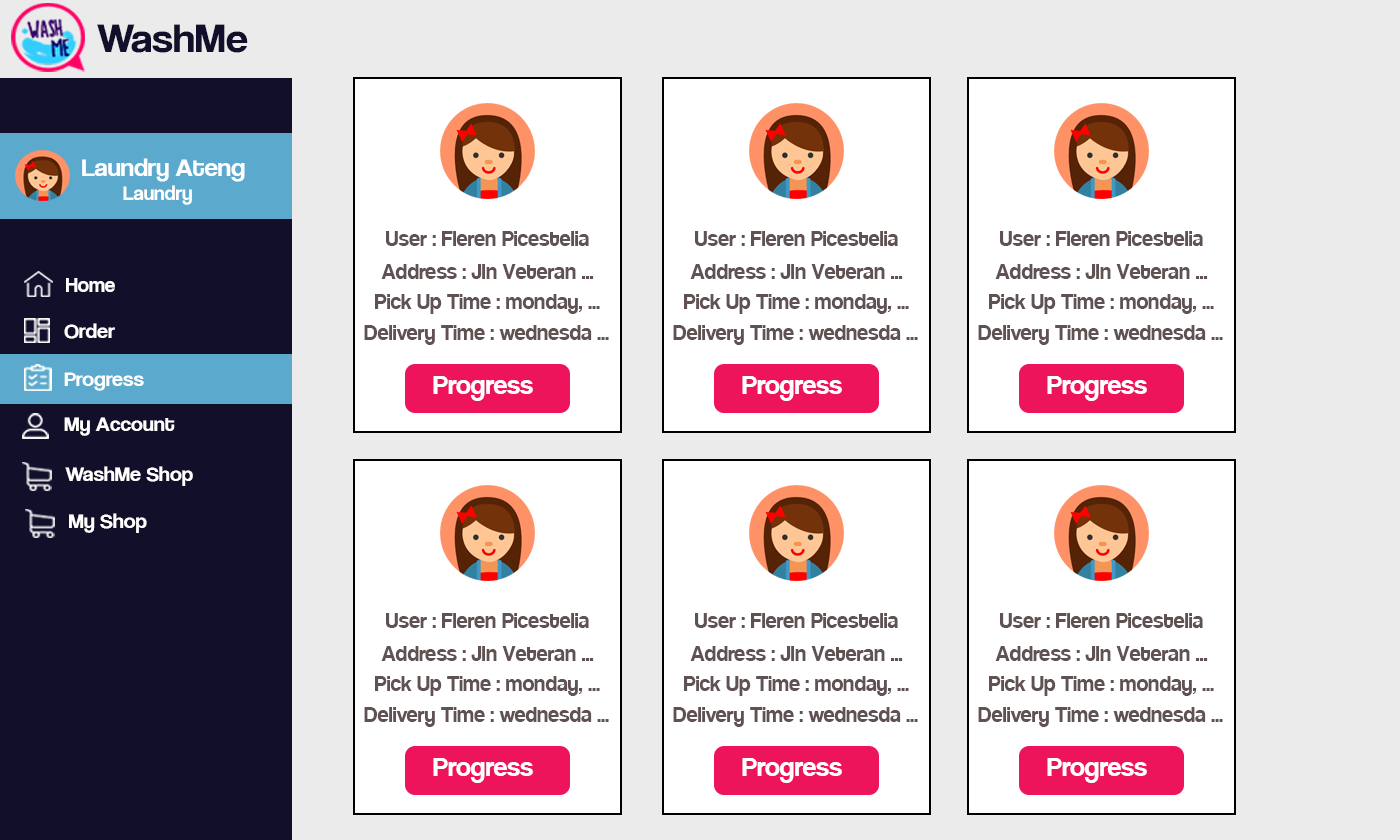
<style>
.page{position:relative;width:1400px;height:840px;background:#ffffff}
.page>*{position:absolute;margin:0}
.t1{font:42.1px "CoolveticaRg-Regular";color:#120f2b;scale:1.05 1}
.t2{font:25.2px "CoolveticaRg-Regular";color:#ffffff;scale:1.05 1}
.t3{font:20px "CoolveticaRg-Regular";color:#ffffff;scale:1.05 1}
.t4{font:24px "Coolvetica-Regular";color:#605252}
.t5{font:21px "CoolveticaRg-Regular";color:#ffffff}
.t6{font:21px "CoolveticaRg-Regular";color:#ffffff;scale:1.05 1}
.t7{font:30px "Coolvetica-Regular";color:#ffffff}
</style>
<div class="page">
<p class="t1" style="left:97px;top:24px;width:151px;height:29px">WashMe</p>
<p class="t2" style="left:82px;top:158px;width:163px;height:47px">Laundry Ateng<br><span class="t3">        Laundry</span></p>
<p class="t4" style="left:386px;top:231px;width:203px;height:15px">User : Fleren Picestelia</p>
<p class="t4" style="left:695px;top:231px;width:203px;height:15px">User : Fleren Picestelia</p>
<p class="t4" style="left:1000px;top:231px;width:203px;height:15px">User : Fleren Picestelia</p>
<p class="t4" style="left:381px;top:264px;width:213px;height:15px">Address : Jln Veteran ...</p>
<p class="t4" style="left:690px;top:264px;width:213px;height:15px">Address : Jln Veteran ...</p>
<p class="t4" style="left:995px;top:264px;width:213px;height:15px">Address : Jln Veteran ...</p>
<p class="t5" style="left:66px;top:278px;width:49px;height:14px">Home</p>
<p class="t4" style="left:375px;top:294px;width:225px;height:20px">Pick Up Time : monday, ...</p>
<p class="t4" style="left:684px;top:294px;width:225px;height:20px">Pick Up Time : monday, ...</p>
<p class="t4" style="left:989px;top:294px;width:225px;height:20px">Pick Up Time : monday, ...</p>
<p class="t6" style="left:64px;top:323px;width:51px;height:16px">Order</p>
<p class="t4" style="left:364px;top:325px;width:245px;height:20px">Delivery Time : wednesda ...</p>
<p class="t4" style="left:673px;top:325px;width:245px;height:20px">Delivery Time : wednesda ...</p>
<p class="t4" style="left:978px;top:325px;width:245px;height:20px">Delivery Time : wednesda ...</p>
<p class="t6" style="left:64px;top:372px;width:80px;height:19px">Progress</p>
<p class="t7" style="left:433px;top:376px;width:100px;height:25px">Progress</p>
<p class="t7" style="left:742px;top:376px;width:100px;height:25px">Progress</p>
<p class="t7" style="left:1047px;top:376px;width:100px;height:25px">Progress</p>
<p class="t6" style="left:64px;top:417px;width:111px;height:19px">My Account</p>
<p class="t6" style="left:65px;top:466px;width:128px;height:20px">WashMe Shop</p>
<p class="t6" style="left:69px;top:513px;width:78px;height:20px">My Shop</p>
<p class="t4" style="left:386px;top:613px;width:203px;height:15px">User : Fleren Picestelia</p>
<p class="t4" style="left:695px;top:613px;width:203px;height:15px">User : Fleren Picestelia</p>
<p class="t4" style="left:1000px;top:613px;width:203px;height:15px">User : Fleren Picestelia</p>
<p class="t4" style="left:381px;top:646px;width:213px;height:15px">Address : Jln Veteran ...</p>
<p class="t4" style="left:690px;top:646px;width:213px;height:15px">Address : Jln Veteran ...</p>
<p class="t4" style="left:995px;top:646px;width:213px;height:15px">Address : Jln Veteran ...</p>
<p class="t4" style="left:375px;top:676px;width:225px;height:20px">Pick Up Time : monday, ...</p>
<p class="t4" style="left:684px;top:676px;width:225px;height:20px">Pick Up Time : monday, ...</p>
<p class="t4" style="left:989px;top:676px;width:225px;height:20px">Pick Up Time : monday, ...</p>
<p class="t4" style="left:364px;top:707px;width:245px;height:20px">Delivery Time : wednesda ...</p>
<p class="t4" style="left:673px;top:707px;width:245px;height:20px">Delivery Time : wednesda ...</p>
<p class="t4" style="left:978px;top:707px;width:245px;height:20px">Delivery Time : wednesda ...</p>
<p class="t7" style="left:433px;top:758px;width:100px;height:25px">Progress</p>
<p class="t7" style="left:742px;top:758px;width:100px;height:25px">Progress</p>
<p class="t7" style="left:1047px;top:758px;width:100px;height:25px">Progress</p>
</div>
